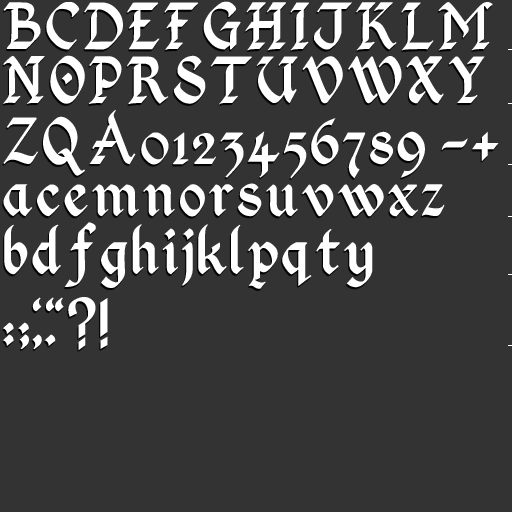
<style>
.page{position:relative;width:512px;height:512px;background:#333333}
.page>*{position:absolute;margin:0}
.t1{font:72px "KingthingsCalligraphica2";color:#ffffff}
</style>
<div class="page">
<p class="t1" style="left:3px;top:2px;width:38px;height:47px">B</p>
<p class="t1" style="left:46px;top:2px;width:34px;height:48px">C</p>
<p class="t1" style="left:84px;top:2px;width:39px;height:48px">D</p>
<p class="t1" style="left:127px;top:2px;width:33px;height:48px">E</p>
<p class="t1" style="left:164px;top:2px;width:35px;height:48px">F</p>
<p class="t1" style="left:203px;top:1px;width:38px;height:49px">G</p>
<p class="t1" style="left:245px;top:2px;width:41px;height:49px">H</p>
<p class="t1" style="left:290px;top:2px;width:19px;height:49px">I</p>
<p class="t1" style="left:314px;top:2px;width:38px;height:48px">J</p>
<p class="t1" style="left:356px;top:2px;width:41px;height:49px">K</p>
<p class="t1" style="left:401px;top:2px;width:33px;height:49px">L</p>
<p class="t1" style="left:438px;top:2px;width:55px;height:49px">M</p>
<p class="t1" style="left:3px;top:55px;width:42px;height:49px">N</p>
<p class="t1" style="left:50px;top:55px;width:35px;height:49px">O</p>
<p class="t1" style="left:89px;top:56px;width:33px;height:48px">P</p>
<p class="t1" style="left:127px;top:56px;width:42px;height:49px">R</p>
<p class="t1" style="left:174px;top:55px;width:32px;height:49px">S</p>
<p class="t1" style="left:210px;top:56px;width:42px;height:49px">T</p>
<p class="t1" style="left:256px;top:56px;width:42px;height:47px">U</p>
<p class="t1" style="left:302px;top:56px;width:41px;height:48px">V</p>
<p class="t1" style="left:348px;top:56px;width:54px;height:48px">W</p>
<p class="t1" style="left:406px;top:56px;width:38px;height:48px">X</p>
<p class="t1" style="left:449px;top:56px;width:36px;height:47px">Y</p>
<p class="t1" style="left:89px;top:109px;width:47px;height:56px">A</p>
<p class="t1" style="left:3px;top:117px;width:35px;height:47px">Z</p>
<p class="t1" style="left:43px;top:116px;width:42px;height:60px">Q</p>
<p class="t1" style="left:311px;top:118px;width:28px;height:47px">6</p>
<p class="t1" style="left:141px;top:132px;width:28px;height:33px">0</p>
<p class="t1" style="left:173px;top:132px;width:16px;height:33px">1</p>
<p class="t1" style="left:193px;top:133px;width:23px;height:31px">2</p>
<p class="t1" style="left:220px;top:132px;width:24px;height:46px">3</p>
<p class="t1" style="left:247px;top:131px;width:33px;height:47px">4</p>
<p class="t1" style="left:284px;top:132px;width:23px;height:47px">5</p>
<p class="t1" style="left:343px;top:132px;width:23px;height:47px">7</p>
<p class="t1" style="left:370px;top:131px;width:23px;height:34px">8</p>
<p class="t1" style="left:397px;top:131px;width:28px;height:47px">9</p>
<p class="t1" style="left:441px;top:131px;width:58px;height:31px">-+</p>
<p class="t1" style="left:3px;top:184px;width:30px;height:33px">a</p>
<p class="t1" style="left:37px;top:184px;width:23px;height:33px">c</p>
<p class="t1" style="left:64px;top:184px;width:24px;height:33px">e</p>
<p class="t1" style="left:92px;top:184px;width:47px;height:33px">m</p>
<p class="t1" style="left:143px;top:184px;width:32px;height:33px">n</p>
<p class="t1" style="left:180px;top:184px;width:25px;height:33px">o</p>
<p class="t1" style="left:209px;top:184px;width:25px;height:32px">r</p>
<p class="t1" style="left:238px;top:183px;width:24px;height:34px">s</p>
<p class="t1" style="left:266px;top:184px;width:32px;height:33px">u</p>
<p class="t1" style="left:302px;top:184px;width:32px;height:33px">v</p>
<p class="t1" style="left:337px;top:184px;width:47px;height:33px">w</p>
<p class="t1" style="left:388px;top:184px;width:30px;height:33px">x</p>
<p class="t1" style="left:421px;top:184px;width:24px;height:32px">z</p>
<p class="t1" style="left:64px;top:222px;width:32px;height:65px">f</p>
<p class="t1" style="left:4px;top:224px;width:24px;height:51px">b</p>
<p class="t1" style="left:32px;top:224px;width:29px;height:50px">d</p>
<p class="t1" style="left:132px;top:224px;width:27px;height:50px">h</p>
<p class="t1" style="left:162px;top:228px;width:16px;height:47px">i</p>
<p class="t1" style="left:182px;top:228px;width:12px;height:58px">j</p>
<p class="t1" style="left:198px;top:224px;width:29px;height:51px">k</p>
<p class="t1" style="left:231px;top:224px;width:13px;height:51px">l</p>
<p class="t1" style="left:316px;top:229px;width:24px;height:46px">t</p>
<p class="t1" style="left:101px;top:242px;width:27px;height:46px">g</p>
<p class="t1" style="left:248px;top:241px;width:30px;height:48px">p</p>
<p class="t1" style="left:282px;top:242px;width:30px;height:44px">q</p>
<p class="t1" style="left:344px;top:242px;width:29px;height:46px">y</p>
<p class="t1" style="left:32px;top:297px;width:10px;height:15px">‘</p>
<p class="t1" style="left:46px;top:297px;width:18px;height:15px">“</p>
<p class="t1" style="left:68px;top:297px;width:28px;height:54px">?</p>
<p class="t1" style="left:100px;top:298px;width:8px;height:51px">!</p>
<p class="t1" style="left:2px;top:322px;width:12px;height:24px">:</p>
<p class="t1" style="left:18px;top:322px;width:11px;height:28px">;</p>
<p class="t1" style="left:32px;top:334px;width:10px;height:16px">,</p>
<p class="t1" style="left:44px;top:334px;width:12px;height:12px">.</p>
</div>
